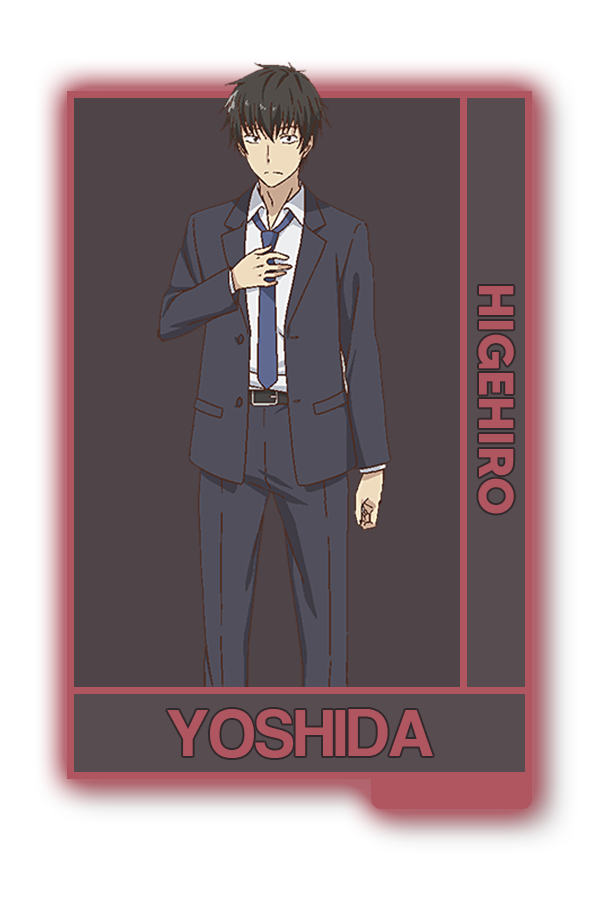
<style>
.page{position:relative;width:600px;height:900px;background:#4f4448}
.page>*{position:absolute;margin:0}
.t1{font:48.8px "MADETOMMY-Bold";color:#b05661}
.t2{font:69px "CoolveticaRg-Regular";color:#b05661}
</style>
<div class="page">
<p class="t1" style="left:478px;top:286px;width:36px;height:228px;rotate:90deg">HIGEHIRO</p>
<p class="t2" style="left:167px;top:709px;width:266px;height:49px">YOSHIDA</p>
</div>
